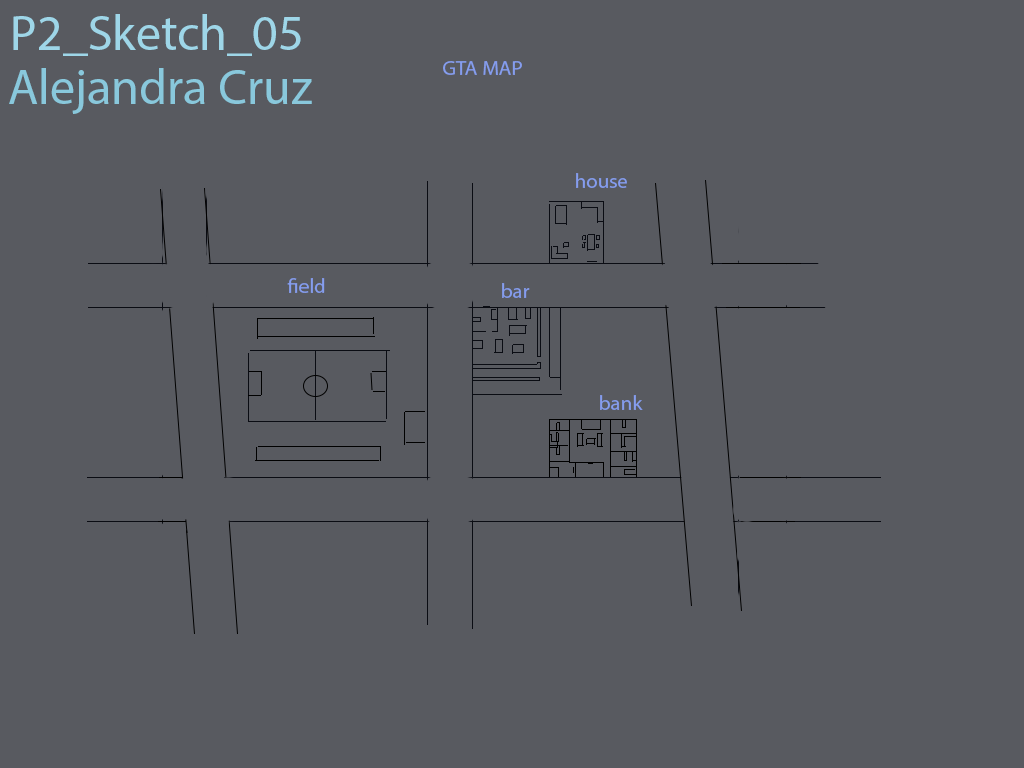
<style>
.page{position:relative;width:1024px;height:768px;background:#585a60}
.page>*{position:absolute;margin:0}
.t1{font:50px "MyriadPro-Regular";color:#9ed6e8}
.t2{font:20.8px "MyriadPro-Regular";color:#859dee}
.t3{font:12px "MyriadPro-Regular";color:#89c8dc}
</style>
<div class="page">
<p class="t1" style="left:13px;top:14px;width:288px;height:42px">P2_Sketch_05</p>
<p class="t2" style="left:443px;top:61px;width:79px;height:14px">GTA MAP</p>
<p class="t3" style="left:9px;top:68px;width:303px;height:46px">Alejandra Cruz</p>
<p class="t2" style="left:576px;top:173px;width:51px;height:15px">house</p>
<p class="t2" style="left:287px;top:278px;width:38px;height:15px">field</p>
<p class="t2" style="left:502px;top:283px;width:28px;height:15px">bar</p>
<p class="t2" style="left:600px;top:395px;width:43px;height:15px">bank</p>
</div>
